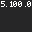
<style>
.page{position:relative;width:32px;height:32px;background:#262627}
.page>*{position:absolute;margin:0}
.t1{font:9px "Consolas";letter-spacing:-0.038em;color:#ffffff}
</style>
<div class="page">
<p class="t1" style="left:1px;top:1px;width:30px;height:6px">5.100.0</p>
</div>
